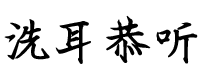
<style>
.page{position:relative;width:200px;height:80px;background:#ffffff}
.page>*{position:absolute;margin:0}
.t1{font:50px "HanWangWCL07";color:#000000}
</style>
<div class="page">
<p class="t1" style="left:4px;top:15px;width:194px;height:49px">洗耳恭听</p>
</div>
